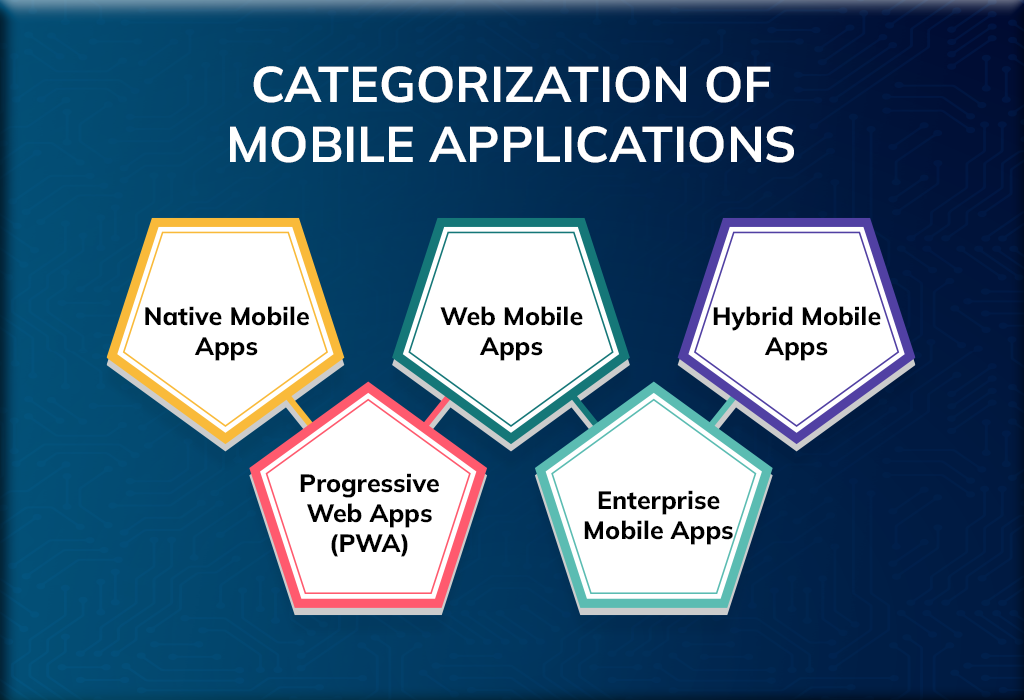
<style>
.page{position:relative;width:1024px;height:700px}
.page>*{position:absolute;margin:0}
.t1{font:50px "Mulish-Bold";color:#ffffff;text-transform:uppercase}
.t2{font:25px "Mulish-ExtraBold";color:#000000}
</style>
<div class="page">
<p class="t1" style="left:230px;top:66px;width:564px;height:97px;text-align:center">Categorization of Mobile Applications</p>
<p class="t2" style="left:145px;top:306px;width:164px;height:55px;text-align:center">Native Mobile Apps</p>
<p class="t2" style="left:440px;top:306px;width:143px;height:55px;text-align:center">Web Mobile Apps</p>
<p class="t2" style="left:713px;top:306px;width:168px;height:55px;text-align:center">Hybrid Mobile Apps</p>
<p class="t2" style="left:300px;top:473px;width:139px;height:84px;text-align:center">Progressive Web Apps (PWA)</p>
<p class="t2" style="left:584px;top:490px;width:149px;height:55px;text-align:center">Enterprise Mobile Apps</p>
</div>
